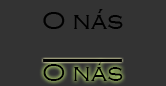
<style>
.page{position:relative;width:166px;height:86px;background:#333333}
.page>*{position:absolute;margin:0}
.t1{font:25.8px "CopperplateGothic-Light";color:#000000}
</style>
<div class="page">
<p class="t1" style="left:43px;top:9px;width:80px;height:20px">O nás</p>
<p class="t1" style="left:43px;top:61px;width:80px;height:20px">O nás</p>
</div>
